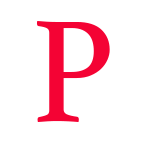
<style>
.page{position:relative;width:144px;height:144px;background:#ffffff}
.page>*{position:absolute;margin:0}
.t1{font:152px "Athelas-Regular";color:#f40334}
</style>
<div class="page">
<p class="t1" style="left:36px;top:21px;width:74px;height:101px">P</p>
</div>
